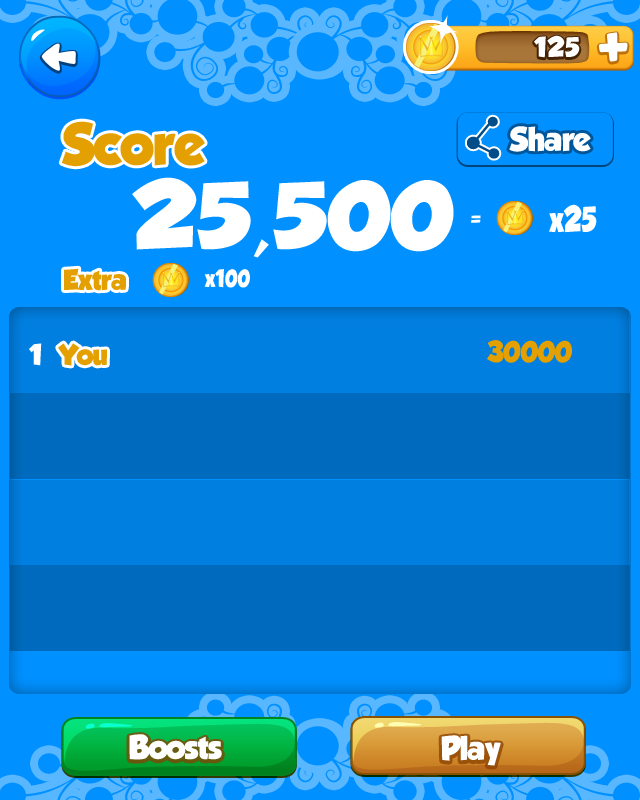
<style>
.page{position:relative;width:640px;height:800px;background:#0090ff}
.page>*{position:absolute;margin:0}
.t1{font:25px "GROBOLD";letter-spacing:0.025em;color:#ffffff}
.t2{font:52.1px "GROBOLD";color:#e3a000}
.t3{font:30px "GROBOLD";letter-spacing:-0.02em;color:#ffffff}
.t4{font:83.9px "GROBOLD";color:#ffffff;scale:1.12 1}
.t5{font:32.1px "GROBOLD";color:#ffffff;scale:0.81 1}
.t6{font:14px "GROBOLD";color:#ffffff}
.t7{font:26px "GROBOLD";letter-spacing:-0.02em;color:#e3a000}
.t8{font:21.9px "GROBOLD";color:#ffffff;scale:0.84 1}
.t9{font:26px "GROBOLD";letter-spacing:-0.02em;color:#ffffff}
</style>
<div class="page">
<p class="t1" style="left:534px;top:35px;width:46px;height:23px">125</p>
<p class="t2" style="left:61px;top:121px;width:144px;height:46px">Score</p>
<p class="t3" style="left:509px;top:126px;width:82px;height:26px">Share</p>
<p class="t4" style="left:132px;top:177px;width:322px;height:81px">25,500</p>
<p class="t5" style="left:549px;top:204px;width:48px;height:29px">x25</p>
<p class="t6" style="left:471px;top:215px;width:10px;height:8px">=</p>
<p class="t7" style="left:64px;top:268px;width:62px;height:23px">Extra</p>
<p class="t8" style="left:204px;top:269px;width:46px;height:19px">x100</p>
<p class="t7" style="left:487px;top:340px;width:85px;height:23px">30000</p>
<p class="t9" style="left:29px;top:343px;width:13px;height:23px">1</p>
<p class="t7" style="left:58px;top:343px;width:49px;height:23px">You</p>
<p class="t3" style="left:129px;top:734px;width:93px;height:26px">Boosts</p>
<p class="t3" style="left:441px;top:735px;width:60px;height:31px">Play</p>
</div>
